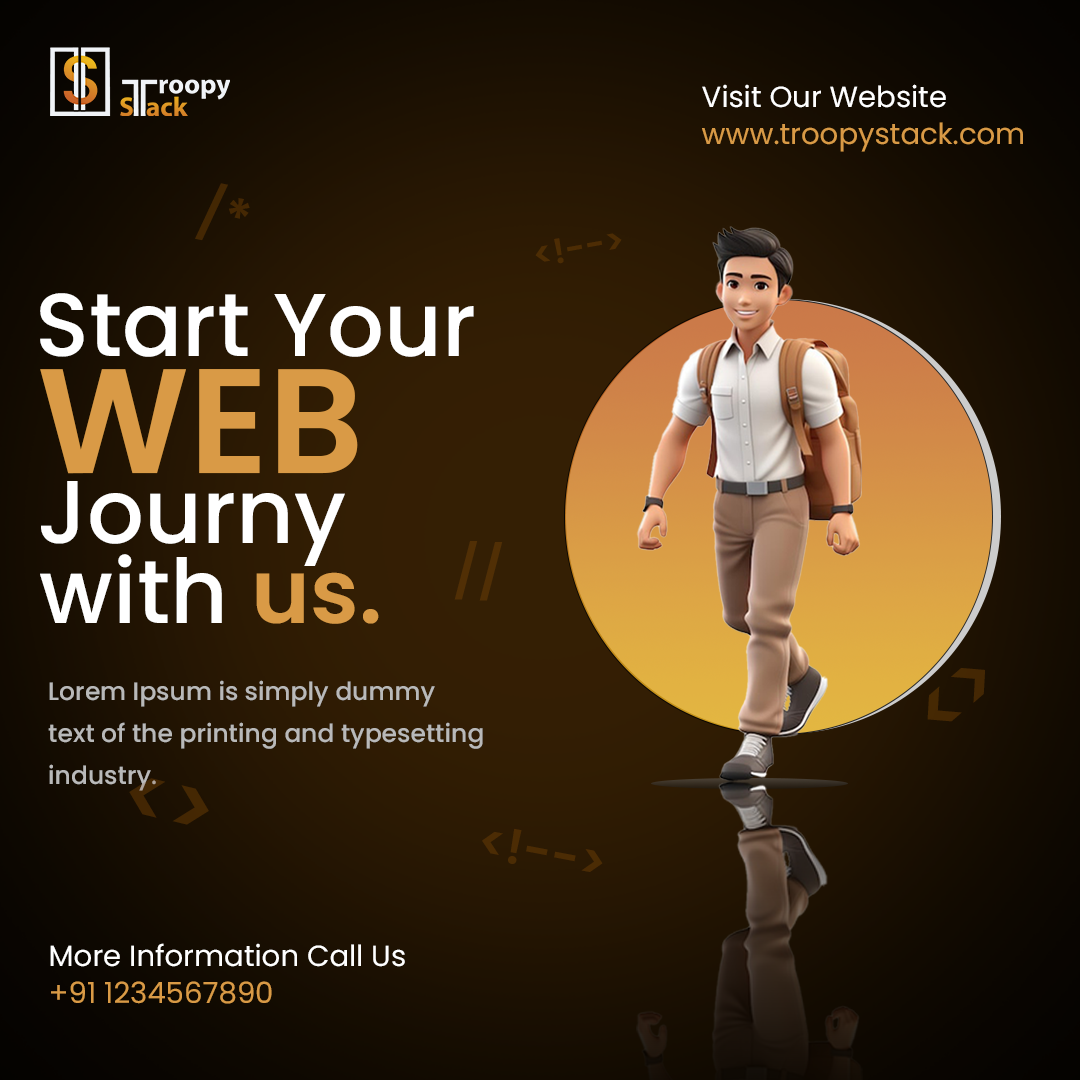
<style>
.page{position:relative;width:1080px;height:1080px}
.page>*{position:absolute;margin:0}
.t1{font:29.2px "Poppins-Regular";color:#ffffff}
.t2{font:29.2px "Poppins-Regular";color:#d99a46}
.t3{font:52.8px "Poppins-SemiBold";color:#442703}
.t4{font:34.8px "Poppins-SemiBold";color:#4d2c04}
.t5{font:89.2px "Poppins-Medium";color:#ffffff}
.t6{font:148.7px "Poppins-SemiBold";color:#d99a46}
.t7{font:52.1px "Poppins-SemiBold";color:#512f05}
.t8{font:89.2px "Poppins-SemiBold";color:#d99a46}
.t9{font:76.9px "Poppins-SemiBold";color:#452803}
.t10{font:25px/41.7px "Poppins-Medium";color:#b9b9b9}
.t11{font:82.6px "Poppins-SemiBold";color:#442703}
.t12{font:48.9px "Poppins-SemiBold";color:#4c2c04}
</style>
<div class="page">
<p class="t1" style="left:702px;top:84px;width:244px;height:24px">Visit Our Website</p>
<p class="t2" style="left:702px;top:122px;width:321px;height:30px">www.troopystack.com</p>
<p class="t3" style="left:195px;top:183px;width:55px;height:58px;rotate:12deg">/*</p>
<p class="t4" style="left:535px;top:233px;width:87px;height:31px;rotate:-10deg">&lt;!--&gt;</p>
<p class="t5" style="left:40px;top:293px;width:434px;height:64px">Start Your</p>
<p class="t6" style="left:40px;top:369px;width:318px;height:105px">WEB</p>
<p class="t5" style="left:41px;top:481px;width:304px;height:85px">Journy</p>
<p class="t7" style="left:454px;top:541px;width:49px;height:60px;rotate:1deg">//</p>
<p class="t5" style="left:40px;top:554px;width:339px;height:70px">with <span class="t8">us.</span></p>
<p class="t9" style="left:927px;top:668px;width:58px;height:54px;rotate:-41deg">&lt;&gt;</p>
<p class="t10" style="left:48px;top:680px;width:435px;height:111px">Lorem Ipsum is simply dummy <br>text of the printing and typesetting <br>industry.</p>
<p class="t11" style="left:129px;top:778px;width:80px;height:47px;rotate:14deg">&lt;&gt;</p>
<p class="t12" style="left:482px;top:828px;width:121px;height:44px;rotate:11deg">&lt;!--&gt;</p>
<p class="t1" style="left:50px;top:943px;width:355px;height:24px">More Information Call Us</p>
<p class="t2" style="left:51px;top:981px;width:221px;height:23px">+91 1234567890</p>
</div>
